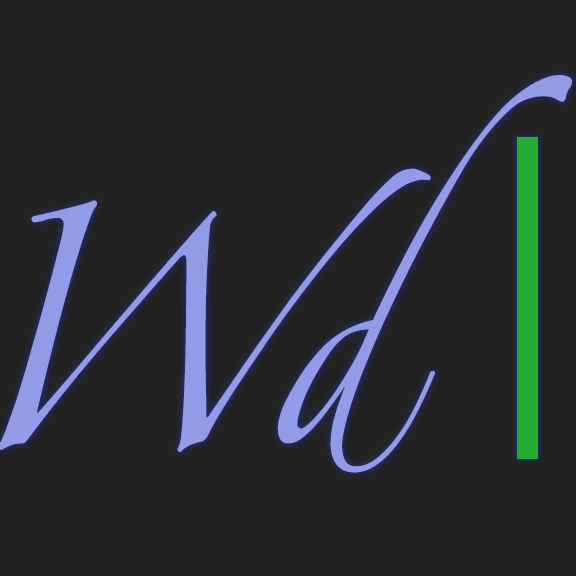
<style>
.page{position:relative;width:576px;height:576px;background:#222222}
.page>*{position:absolute;margin:0}
.t1{font:215.2px "Zapfino";color:#919be7;font-weight:bold;scale:0.82 1}
</style>
<div class="page">
<p class="t1" style="left:0px;top:75px;width:572px;height:398px;text-align:center">Wd</p>
</div>
